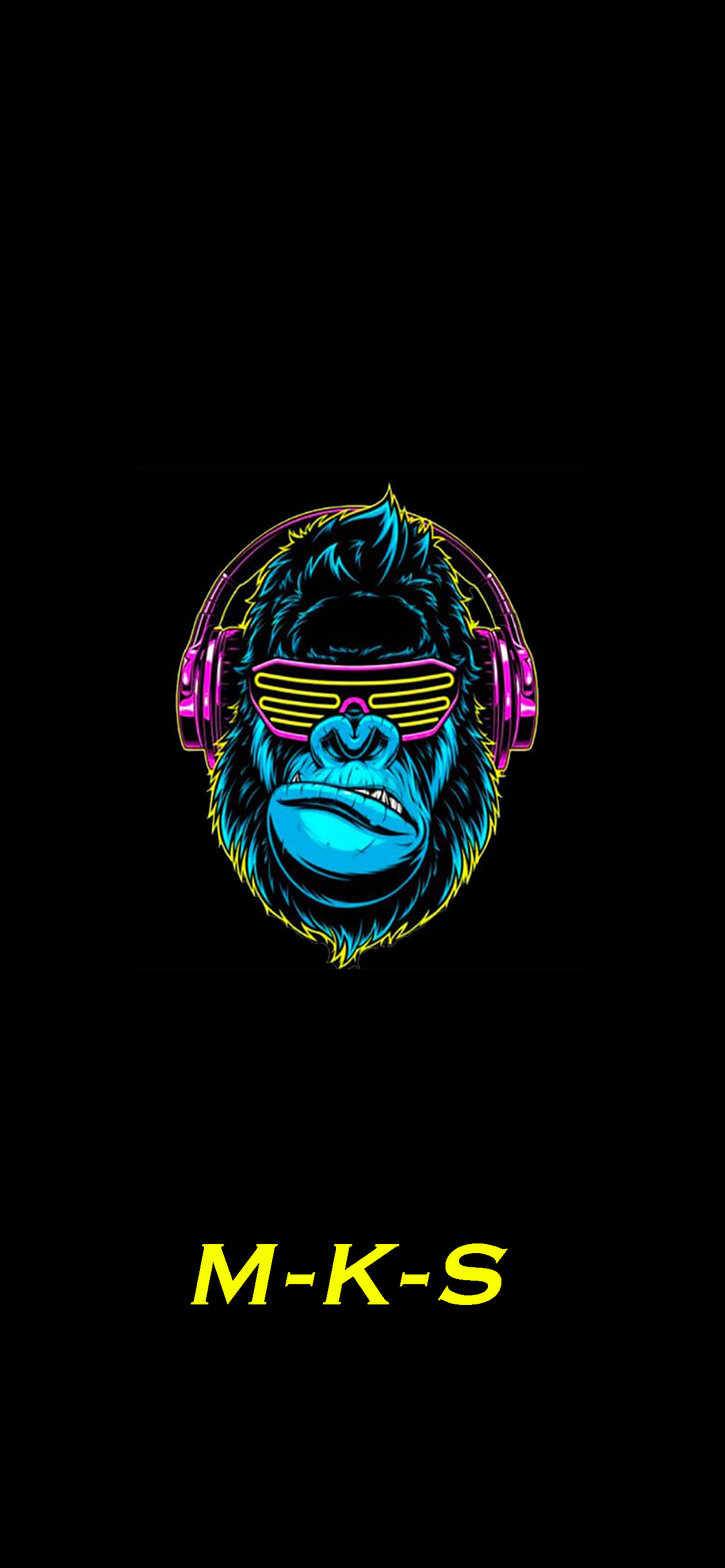
<style>
.page{position:relative;width:725px;height:1568px;background:#000000}
.page>*{position:absolute;margin:0}
.t1{font:114.6px "Copperplate";color:#f8ff03;text-transform:uppercase;font-style:italic}
</style>
<div class="page">
<p class="t1" style="left:191px;top:1243px;width:316px;height:62px">M-K-S</p>
</div>
